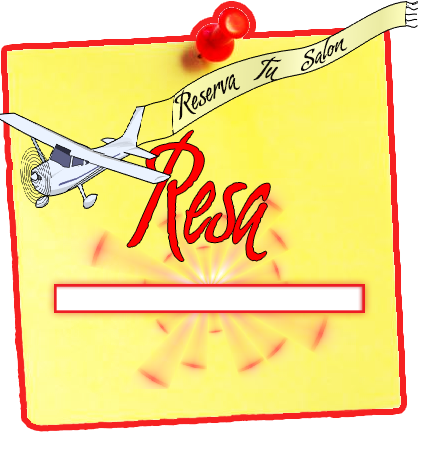
<style>
.page{position:relative;width:422px;height:450px;background:#ffffff}
.page>*{position:absolute;margin:0}
.t1{font:17.7px "AlmondScript";color:#0e0907;scale:1.36 1}
.t2{font:22.3px "AlmondScript";color:#0e0907;scale:1.12 1}
.t3{font:24.9px "AlmondScript";color:#0e0907}
.t4{font:120.6px "AlmondScript";color:#ff0000;scale:0.65 1}
</style>
<div class="page">
<p class="t1" style="left:301px;top:36px;width:47px;height:35px;rotate:-29deg">Salon</p>
<p class="t2" style="left:253px;top:56px;width:29px;height:25px">Tu</p>
<p class="t3" style="left:174px;top:74px;width:67px;height:46px;rotate:-30deg">Reserva</p>
<p class="t4" style="left:127px;top:130px;width:143px;height:131px;rotate:1deg">Resa</p>
</div>
